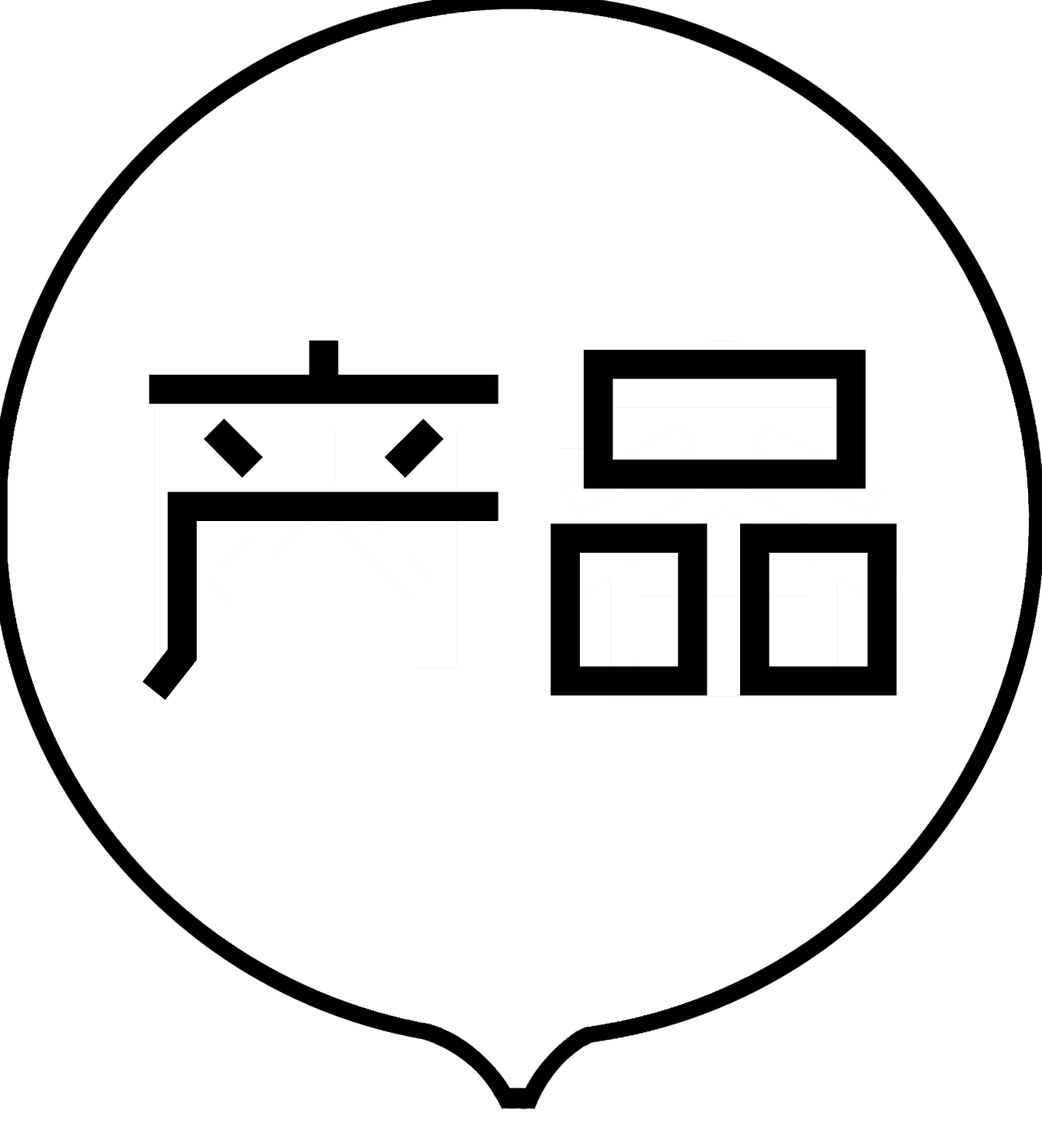
<style>
.page{position:relative;width:1042px;height:1145px;background:#ffffff}
.page>*{position:absolute;margin:0}
.t1{font:403.1px "RTWSShangGoG0v1-Regular";color:#000000}
</style>
<div class="page">
<p class="t1" style="left:142px;top:340px;width:755px;height:360px">产品</p>
</div>
